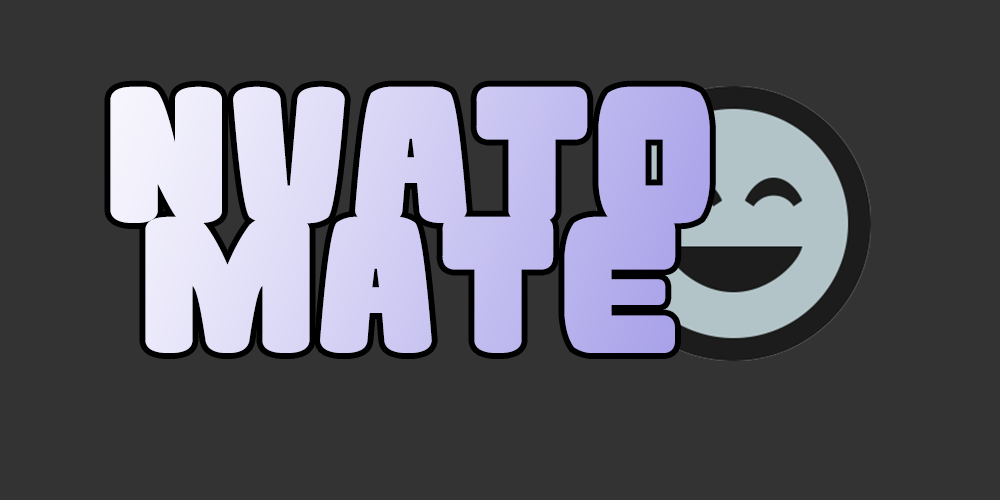
<style>
.page{position:relative;width:1000px;height:500px;background:#333333}
.page>*{position:absolute;margin:0}
.t1{font:182.8px/12.7px "Atama-Simple";scale:1.04 1}
</style>
<div class="page">
<p class="t1" style="left:110px;top:86px;width:600px;height:267px;text-align:center">nvato<br><br><br><br><br><br><br><br><br><br>Mate</p>
</div>
